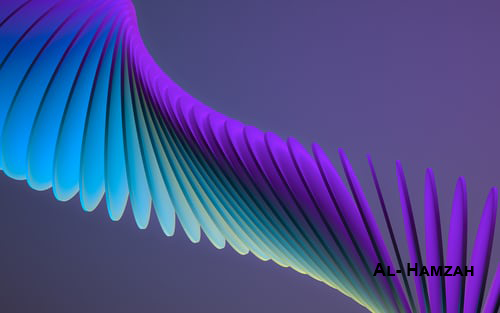
<style>
.page{position:relative;width:500px;height:313px}
.page>*{position:absolute;margin:0}
.t1{font:18px "Arial-BoldMT";letter-spacing:-0.005em;color:#000000;font-variant:small-caps}
</style>
<div class="page">
<p class="t1" style="left:373px;top:263px;width:101px;height:13px">Al- Hamzah</p>
</div>
